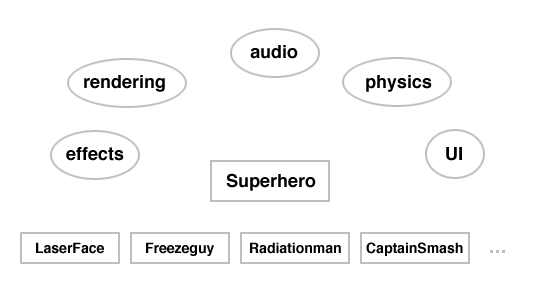
<style>
.page{position:relative;width:540px;height:283px;background:#ffffff}
.page>*{position:absolute;margin:0}
.t1{font:18px "Helvetica-Bold";color:#000000}
.t2{font:14px "Helvetica-Bold";color:#000000}
</style>
<div class="page">
<p class="t1" style="left:250px;top:45px;width:48px;height:14px">audio</p>
<p class="t1" style="left:84px;top:75px;width:81px;height:17px">rendering</p>
<p class="t1" style="left:366px;top:75px;width:66px;height:17px">physics</p>
<p class="t1" style="left:66px;top:147px;width:58px;height:14px">effects</p>
<p class="t1" style="left:446px;top:147px;width:16px;height:14px">UI</p>
<p class="t1" style="left:226px;top:173px;width:90px;height:18px">Superhero</p>
<p class="t2" style="left:36px;top:242px;width:68px;height:12px">LaserFace</p>
<p class="t2" style="left:146px;top:242px;width:68px;height:14px">Freezeguy</p>
<p class="t2" style="left:250px;top:242px;width:91px;height:12px">Radiationman</p>
<p class="t2" style="left:366px;top:242px;width:97px;height:14px">CaptainSmash</p>
</div>
